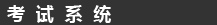
<style>
.page{position:relative;width:217px;height:25px;background:#333333}
.page>*{position:absolute;margin:0}
.t1{font:18px "MicrosoftYaHei-Bold";color:#ffffff}
</style>
<div class="page">
<p class="t1" style="left:7px;top:5px;width:104px;height:18px">考  试  系  统</p>
</div>
